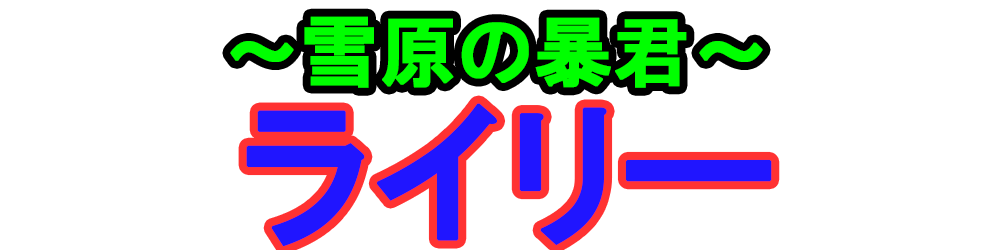
<style>
.page{position:relative;width:1000px;height:250px;background:#ffffff}
.page>*{position:absolute;margin:0}
.t1{font:76.4px "HGPGothicE";color:#00ff00;font-weight:bold}
.t2{font:157.8px "HGPGothicE";color:#2015ff;font-weight:bold}
</style>
<div class="page">
<p class="t1" style="left:230px;top:16px;width:533px;height:72px">～雪原の暴君～</p>
<p class="t2" style="left:246px;top:103px;width:526px;height:144px">ライリー</p>
</div>
